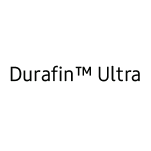
<style>
.page{position:relative;width:151px;height:151px;background:#ffffff}
.page>*{position:absolute;margin:0}
.t1{font:20px "SamsungOneKoreanOTF-400";color:#030503}
</style>
<div class="page">
<p class="t1" style="left:10px;top:65px;width:130px;height:17px">Durafin™ Ultra</p>
</div>
